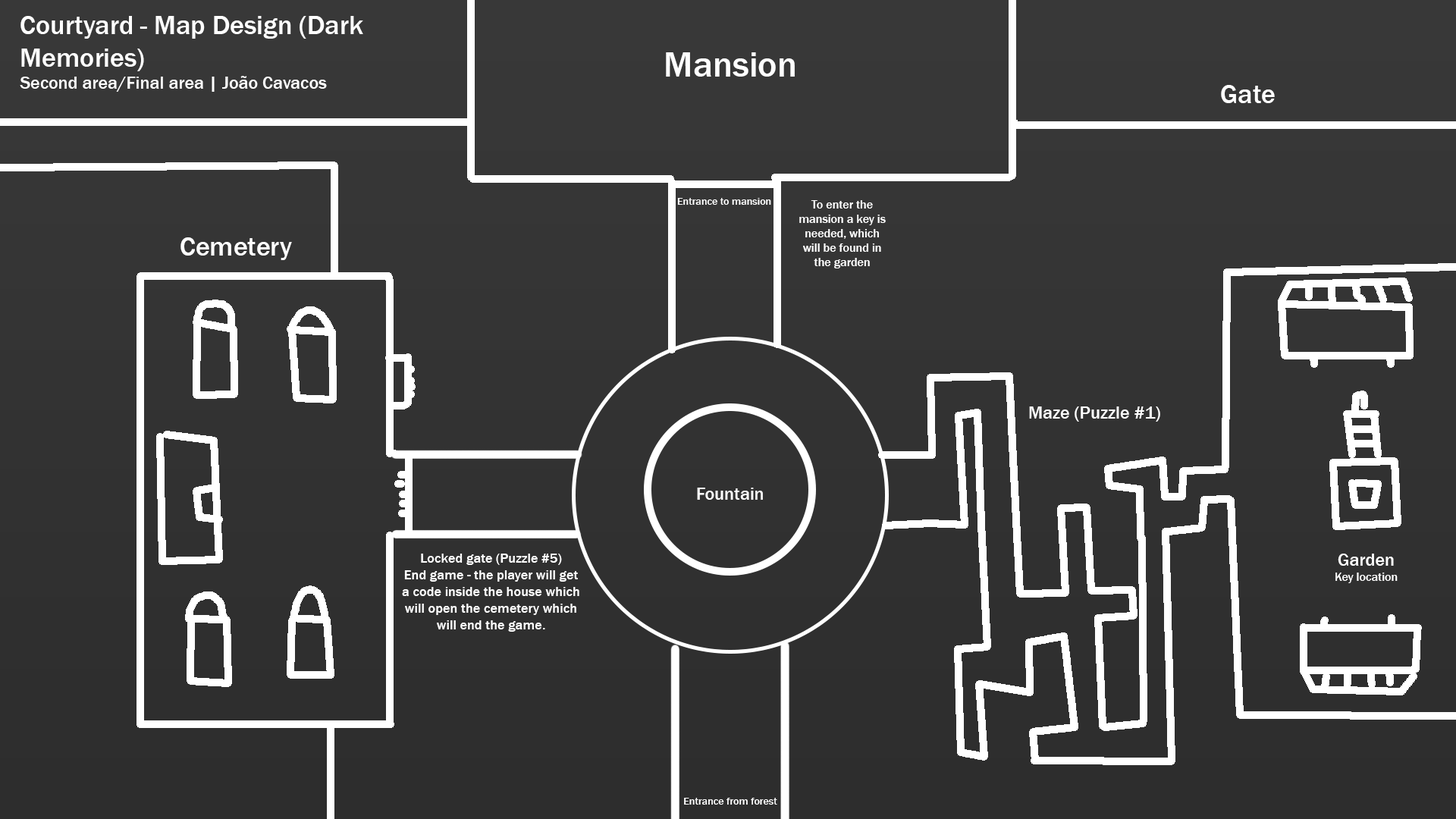
<style>
.page{position:relative;width:1456px;height:819px}
.page>*{position:absolute;margin:0}
.t1{font:27.3px "FranklinGothic-Medium";color:#ffffff}
.t2{font:18.2px "FranklinGothic-Medium";color:#ffffff}
.t3{font:36.4px "FranklinGothic-Medium";color:#ffffff}
.t4{font:10.6px "FranklinGothic-Medium";color:#ffffff}
.t5{font:12.1px "FranklinGothic-Medium";color:#ffffff}
.t6{font:13.8px "FranklinGothic-Medium";color:#ffffff}
</style>
<div class="page">
<p class="t1" style="left:20px;top:16px;width:343px;height:76px">Courtyard - Map Design (Dark Memories)<br><span class="t2">Second area/Final area | João Cavacos</span></p>
<p class="t3" style="left:666px;top:52px;width:129px;height:25px">Mansion</p>
<p class="t1" style="left:1221px;top:85px;width:54px;height:18px">Gate</p>
<p class="t4" style="left:677px;top:198px;width:94px;height:7px">Entrance to mansion</p>
<p class="t5" style="left:799px;top:200px;width:87px;height:68px;text-align:center">To enter the mansion a key is needed, which will be found in the garden</p>
<p class="t1" style="left:180px;top:237px;width:112px;height:23px">Cemetery</p>
<p class="t2" style="left:1029px;top:406px;width:131px;height:16px">Maze (Puzzle #1)</p>
<p class="t2" style="left:697px;top:488px;width:66px;height:12px">Fountain</p>
<p class="t6" style="left:402px;top:554px;width:177px;height:78px;text-align:center">Locked gate (Puzzle #5)<br>End game - the player will get a code inside the house which will open the cemetery which will end the game.</p>
<p class="t5" style="left:1335px;top:554px;width:63px;height:29px;text-align:center"><span class="t2">Garden<br></span>Key location</p>
<p class="t4" style="left:684px;top:798px;width:93px;height:7px">Entrance from forest</p>
</div>
